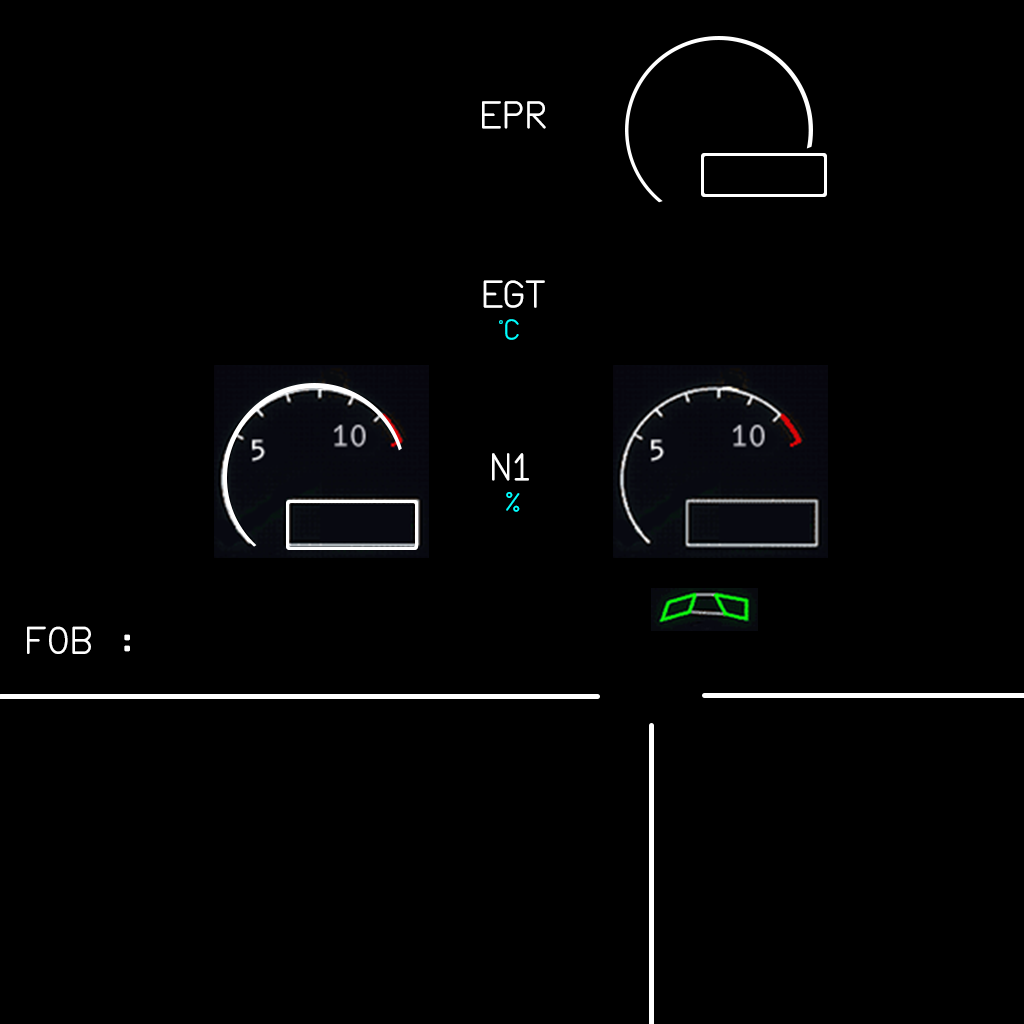
<style>
.page{position:relative;width:1024px;height:1024px;background:#000000}
.page>*{position:absolute;margin:0}
.t1{font:36px "FBW-Display-EIS-A320";color:#ffffff}
.t2{font:27px "FBW-Display-EIS-A320";color:#00ffff}
.t3{font:36px "FBW-Display-EIS-A320";letter-spacing:0.01em;color:#ffffff}
.t4{font:26px "FBW-Display-EIS-A320";letter-spacing:0.01em;color:#00ffff}
.t5{font:36px "FBW-Display-EIS-A320";letter-spacing:0.05em;color:#ffffff}
.t6{font:36px "FBW-Display-EIS-A320";letter-spacing:-0.07em;color:#ffffff}
</style>
<div class="page">
<p class="t1" style="left:482px;top:101px;width:64px;height:28px">EPR</p>
<p class="t1" style="left:483px;top:280px;width:62px;height:28px">EGT</p>
<p class="t2" style="left:499px;top:319px;width:20px;height:21px">°C</p>
<p class="t3" style="left:492px;top:453px;width:37px;height:59px;text-align:center">N1<br><span class="t4">%</span></p>
<p class="t5" style="left:27px;top:626px;width:103px;height:28px"><span class="t6">F</span>OB :</p>
</div>
